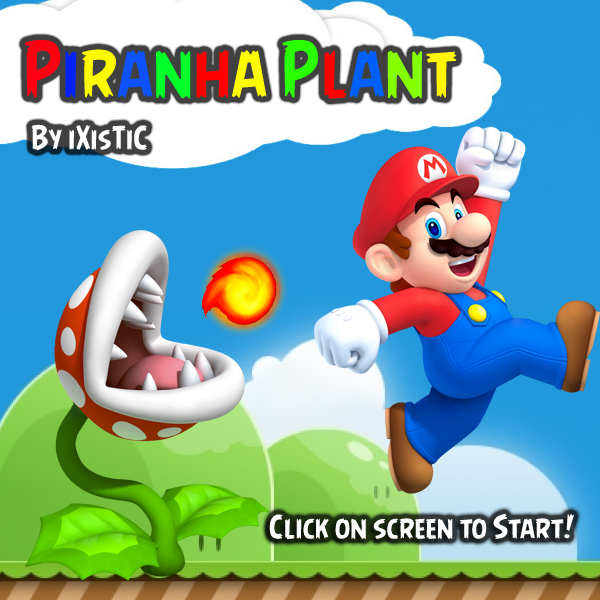
<style>
.page{position:relative;width:600px;height:600px}
.page>*{position:absolute;margin:0}
.t1{font:30px "AngryBirds-Regular";color:#fefefe}
</style>
<div class="page">
<p class="t1" style="left:31px;top:124px;width:116px;height:27px">By iXisTiC</p>
<p class="t1" style="left:269px;top:513px;width:305px;height:26px">Click on screen to Start!</p>
</div>
